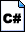
<style>
.page{position:relative;width:25px;height:32px;background:#ffffff}
.page>*{position:absolute;margin:0}
.t1{font:13px "Arial-Black";color:#000000}
</style>
<div class="page">
<p class="t1" style="left:3px;top:13px;width:18px;height:11px">C#</p>
</div>
